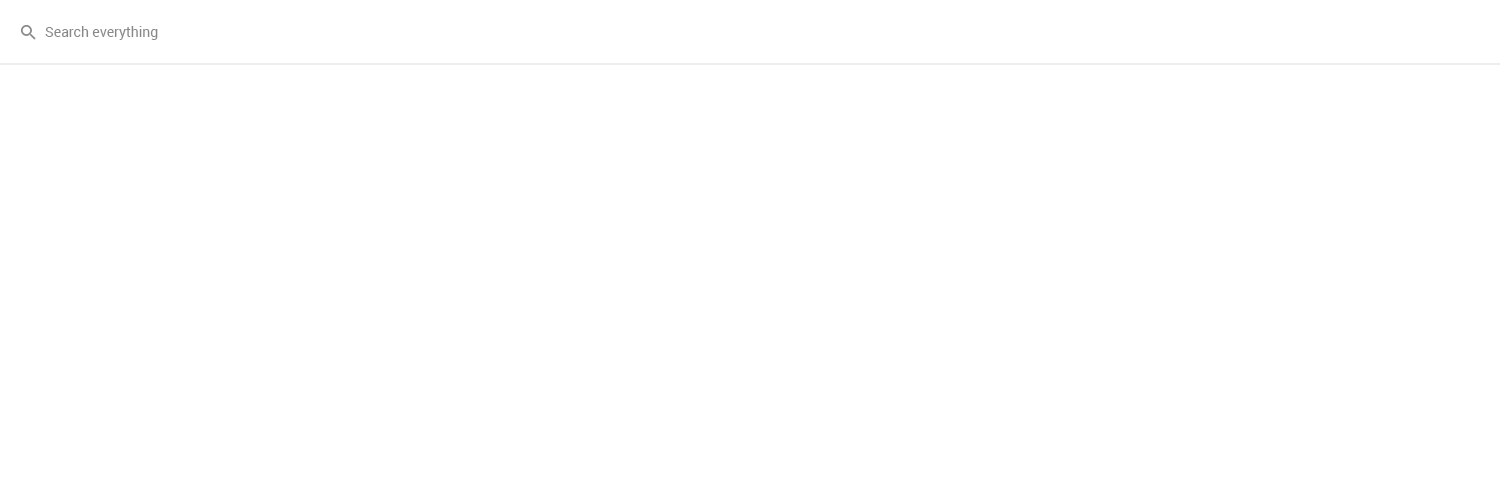
<style>
.page{position:relative;width:1500px;height:500px;background:#ffffff}
.page>*{position:absolute;margin:0}
.t1{font:14px "Roboto-Regular";color:#888888}
</style>
<div class="page">
<p class="t1" style="left:45px;top:26px;width:113px;height:14px">Search everything</p>
</div>
